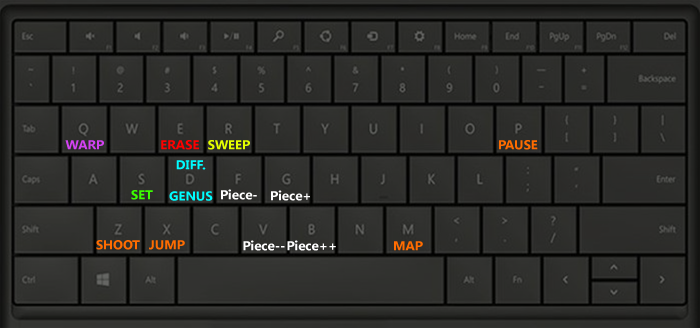
<style>
.page{position:relative;width:700px;height:328px}
.page>*{position:absolute;margin:0}
.t1{font:13.1px "KhmerUI-Bold";color:#d242f1}
.t2{font:13.1px "KhmerUI-Bold";color:#ff0000}
.t3{font:13.1px "KhmerUI-Bold";color:#e4ff00}
.t4{font:13.1px "KhmerUI-Bold";color:#ff6c00}
.t5{font:13.1px "KhmerUI-Bold";color:#00fcff}
.t6{font:13.1px "KhmerUI-Bold";color:#3cff00}
.t7{font:13.1px "KhmerUI-Bold";color:#ffffff}
</style>
<div class="page">
<p class="t1" style="left:65px;top:140px;width:39px;height:10px">WARP</p>
<p class="t2" style="left:161px;top:140px;width:38px;height:10px">ERASE</p>
<p class="t3" style="left:208px;top:140px;width:42px;height:10px">SWEEP</p>
<p class="t4" style="left:499px;top:140px;width:39px;height:10px">PAUSE</p>
<p class="t5" style="left:169px;top:160px;width:44px;height:41px;text-align:center">DIFF.<br>GENUS</p>
<p class="t6" style="left:131px;top:190px;width:22px;height:10px">SET</p>
<p class="t7" style="left:221px;top:189px;width:36px;height:11px">Piece-</p>
<p class="t7" style="left:271px;top:190px;width:39px;height:11px">Piece+</p>
<p class="t4" style="left:96px;top:240px;width:44px;height:10px">SHOOT</p>
<p class="t4" style="left:149px;top:240px;width:36px;height:10px">JUMP</p>
<p class="t7" style="left:243px;top:240px;width:42px;height:11px">Piece--</p>
<p class="t7" style="left:287px;top:240px;width:49px;height:11px">Piece++</p>
<p class="t4" style="left:394px;top:241px;width:29px;height:10px">MAP</p>
</div>
